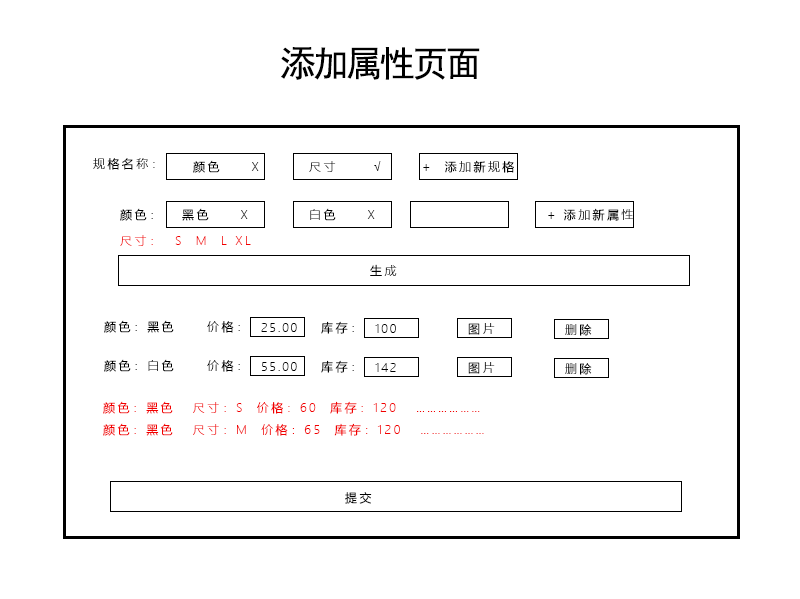
<style>
.page{position:relative;width:800px;height:599px;background:#ffffff}
.page>*{position:absolute;margin:0}
.t1{font:36px "SimHei";letter-spacing:-0.08em;color:#000000}
.t2{font:12px "MicrosoftYaHeiLight";letter-spacing:0.2em;color:#000000}
.t3{font:12px "MicrosoftYaHeiLight";letter-spacing:0.2em;color:#f20000}
.t4{font:12px "MicrosoftYaHeiLight";letter-spacing:0.14em;color:#000000}
.t5{font:12px "MicrosoftYaHeiLight";letter-spacing:0.2em}
</style>
<div class="page">
<p class="t1" style="left:281px;top:47px;width:199px;height:33px">添加属性页面</p>
<p class="t2" style="left:93px;top:158px;width:62px;height:12px">规格名称：</p>
<p class="t2" style="left:193px;top:160px;width:66px;height:13px">颜色     X</p>
<p class="t2" style="left:309px;top:161px;width:72px;height:11px">尺寸      √</p>
<p class="t2" style="left:423px;top:160px;width:91px;height:13px">+  添加新规格</p>
<p class="t2" style="left:120px;top:208px;width:33px;height:13px">颜色：</p>
<p class="t2" style="left:182px;top:208px;width:66px;height:13px">黑色     X</p>
<p class="t2" style="left:310px;top:208px;width:65px;height:13px">白色     X</p>
<p class="t2" style="left:548px;top:208px;width:85px;height:13px">+ 添加新属性</p>
<p class="t3" style="left:120px;top:235px;width:131px;height:11px">尺寸：  S  M  L XL</p>
<p class="t2" style="left:370px;top:264px;width:27px;height:12px">生成</p>
<p class="t2" style="left:104px;top:320px;width:70px;height:13px">颜色：黑色</p>
<p class="t2" style="left:207px;top:321px;width:33px;height:12px">价格：</p>
<p class="t4" style="left:261px;top:323px;width:36px;height:9px">25.00</p>
<p class="t2" style="left:321px;top:321px;width:33px;height:13px">库存：</p>
<p class="t4" style="left:375px;top:324px;width:21px;height:9px">100</p>
<p class="t5" style="left:468px;top:323px;width:27px;height:12px">图片</p>
<p class="t2" style="left:565px;top:324px;width:27px;height:12px">删除</p>
<p class="t2" style="left:104px;top:359px;width:70px;height:13px">颜色：白色</p>
<p class="t2" style="left:207px;top:360px;width:33px;height:12px">价格：</p>
<p class="t4" style="left:261px;top:362px;width:36px;height:9px">55.00</p>
<p class="t2" style="left:321px;top:360px;width:33px;height:13px">库存：</p>
<p class="t4" style="left:375px;top:363px;width:21px;height:9px">142</p>
<p class="t5" style="left:468px;top:362px;width:27px;height:12px">图片</p>
<p class="t2" style="left:565px;top:363px;width:27px;height:12px">删除</p>
<p class="t3" style="left:103px;top:401px;width:377px;height:13px">颜色：黑色   尺寸：S  价格：60  库存：120   ………………</p>
<p class="t3" style="left:103px;top:423px;width:381px;height:13px">颜色：黑色   尺寸：M  价格：65  库存：120   ………………</p>
<p class="t2" style="left:345px;top:492px;width:27px;height:12px">提交</p>
</div>
